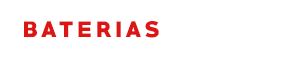
<style>
.page{position:relative;width:300px;height:60px;background:#ffffff}
.page>*{position:absolute;margin:0}
.t1{font:20px "PRIMETIME-Regular";letter-spacing:0.2em;color:#dd1515;text-transform:uppercase}
.t2{font:20px "PRIMETIME-Regular";letter-spacing:0.2em;color:#ffffff;text-transform:uppercase}
</style>
<div class="page">
<p class="t1" style="left:24px;top:17px;width:261px;height:24px">Baterias <span class="t2">Jaçanã</span></p>
</div>
